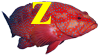
<style>
.page{position:relative;width:100px;height:56px;background:#ffffff}
.page>*{position:absolute;margin:0}
.t1{font:48px "TimesNewRomanPS-BoldMT";color:#ffff00}
</style>
<div class="page">
<p class="t1" style="left:31px;top:2px;width:21px;height:22px">z</p>
</div>
